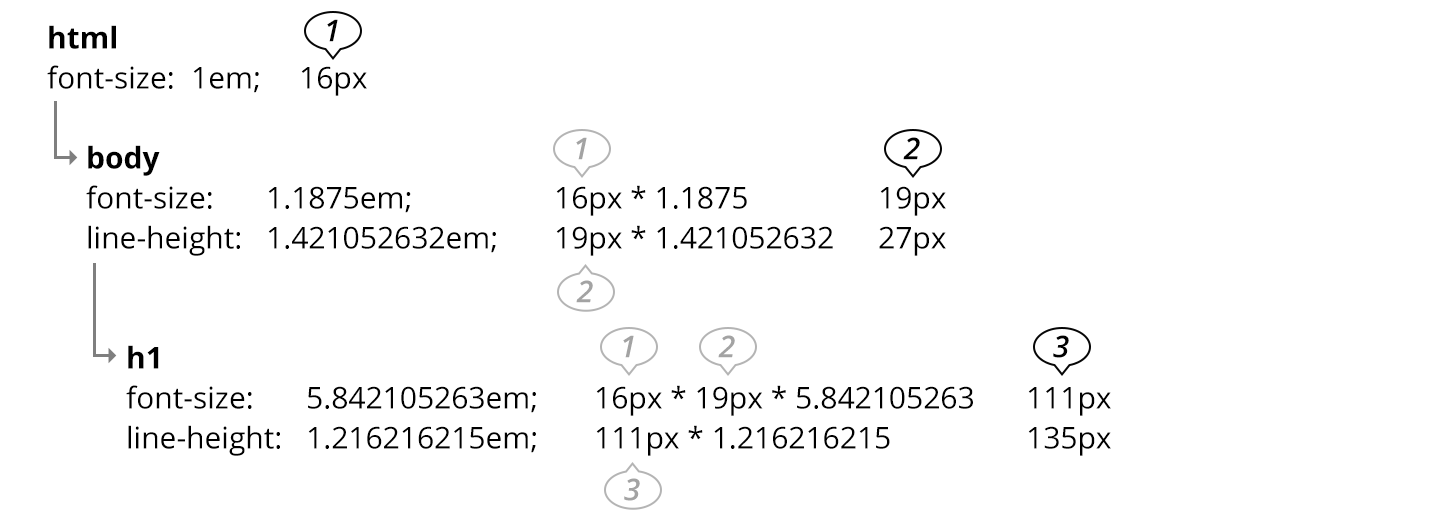
<style>
.page{position:relative;width:1442px;height:524px;background:#ffffff}
.page>*{position:absolute;margin:0}
.t1{font:30px/40px "OpenSans";color:#000000}
.t2{font:30px/40px "OpenSans-Bold";color:#000000}
.t3{font:30px "OpenSans-SemiboldItalic";color:#000000}
.t4{font:30px "OpenSans-SemiboldItalic";color:#a3a3a3}
</style>
<div class="page">
<p class="t1" style="left:47px;top:25px;width:320px;height:71px"><span class="t2">html</span><br>font-size: 1em;  16px</p>
<p class="t3" style="left:327px;top:19px;width:11px;height:23px">1</p>
<p class="t4" style="left:576px;top:137px;width:11px;height:23px">1</p>
<p class="t3" style="left:903px;top:137px;width:17px;height:23px">2</p>
<p class="t1" style="left:86px;top:145px;width:860px;height:111px"><span class="t2">body<br></span>font-size:  1.1875em;    16px * 1.1875    19px<br>line-height: 1.421052632em;  19px * 1.421052632   27px</p>
<p class="t4" style="left:576px;top:280px;width:17px;height:23px">2</p>
<p class="t4" style="left:623px;top:335px;width:11px;height:23px">1</p>
<p class="t4" style="left:718px;top:335px;width:17px;height:23px">2</p>
<p class="t3" style="left:1053px;top:335px;width:16px;height:23px">3</p>
<p class="t1" style="left:126px;top:345px;width:985px;height:111px"><span class="t2">h1<br></span>font-size:  5.842105263em;  16px * 19px * 5.842105263  111px<br>line-height: 1.216216215em;  111px * 1.216216215    135px</p>
<p class="t4" style="left:624px;top:478px;width:16px;height:23px">3</p>
</div>
